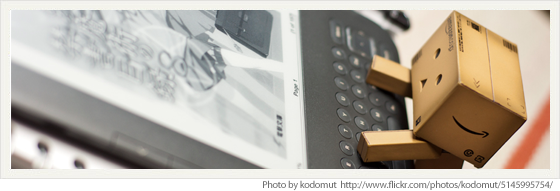
<style>
.page{position:relative;width:560px;height:191px}
.page>*{position:absolute;margin:0}
.t1{font:10px "MyriadPro-Regular";letter-spacing:-0.025em;color:#707070}
</style>
<div class="page">
<p class="t1" style="left:263px;top:180px;width:290px;height:11px">Photo by kodomut  http://www.flickr.com/photos/kodomut/5145995754/</p>
</div>
